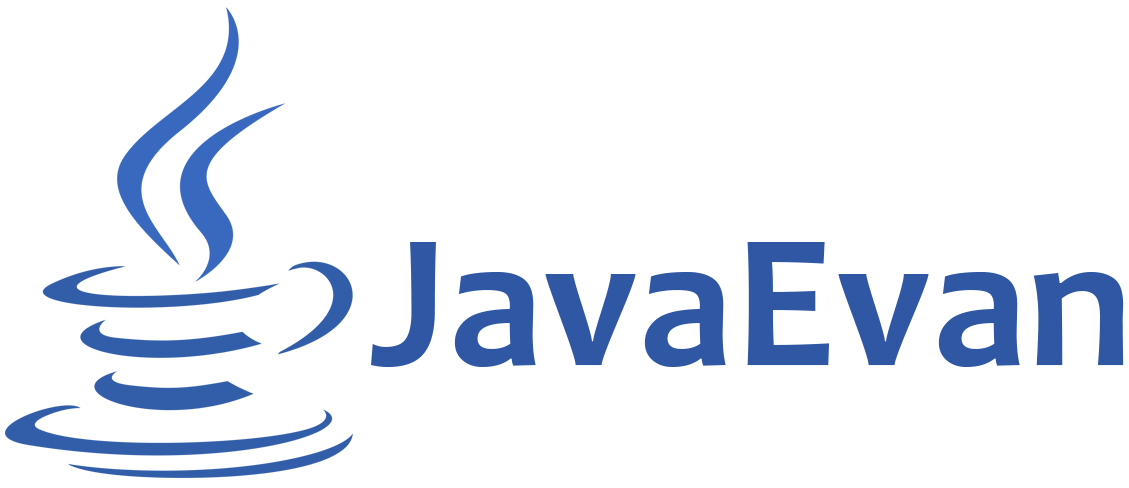
<style>
.page{position:relative;width:1129px;height:488px;background:#ffffff}
.page>*{position:absolute;margin:0}
.t1{font:194.5px "Candara-Bold";color:#2f57a4}
</style>
<div class="page">
<p class="t1" style="left:371px;top:242px;width:753px;height:125px">JavaEvan</p>
</div>
